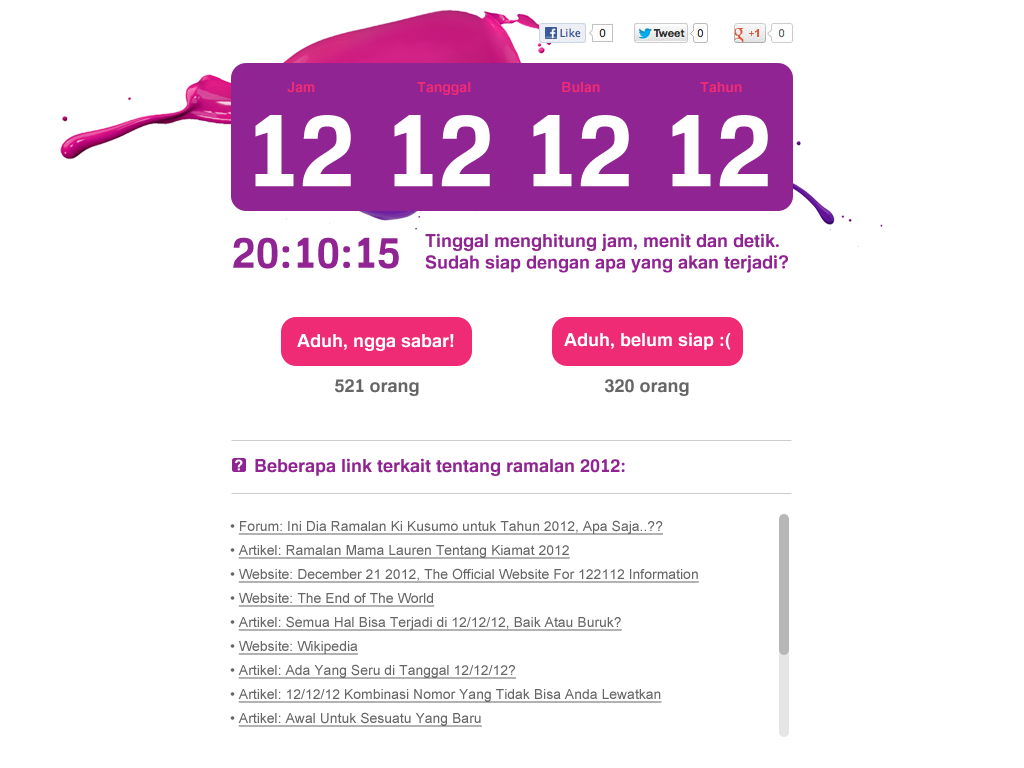
<style>
.page{position:relative;width:1024px;height:768px;background:#ffffff}
.page>*{position:absolute;margin:0}
.t1{font:14px "FamiliarPro-Bold";color:#ee2b74}
.t2{font:100px "FamiliarPro-Bold";color:#ffffff}
.t3{font:18px "FamiliarPro-Bold";color:#902492}
.t4{font:42px "FamiliarPro-Bold";color:#902492}
.t5{font:18px "FamiliarPro-Bold";color:#ffffff}
.t6{font:18px "FamiliarPro-Bold";color:#666666}
.t7{font:14px/24px "ArialMT";color:#666666;text-decoration:underline}
.t8{font:14px/24px "ArialMT";color:#666666}
</style>
<div class="page">
<p class="t1" style="left:287px;top:82px;width:28px;height:11px">Jam</p>
<p class="t1" style="left:417px;top:82px;width:54px;height:13px">Tanggal</p>
<p class="t1" style="left:562px;top:82px;width:38px;height:11px">Bulan</p>
<p class="t1" style="left:700px;top:82px;width:42px;height:11px">Tahun</p>
<p class="t2" style="left:255px;top:115px;width:513px;height:72px">12 12 12 12</p>
<p class="t3" style="left:425px;top:233px;width:363px;height:40px">Tinggal menghitung jam, menit dan detik.<br>Sudah siap dengan apa yang akan terjadi?</p>
<p class="t4" style="left:233px;top:237px;width:166px;height:32px">20:10:15</p>
<p class="t5" style="left:297px;top:334px;width:157px;height:17px">Aduh, ngga sabar!</p>
<p class="t5" style="left:564px;top:332px;width:167px;height:18px">Aduh, belum siap :(</p>
<p class="t6" style="left:335px;top:379px;width:84px;height:17px">521 orang</p>
<p class="t6" style="left:605px;top:379px;width:84px;height:17px">320 orang</p>
<p class="t3" style="left:255px;top:458px;width:370px;height:18px">Beberapa link terkait tentang ramalan 2012:</p>
<p class="t7" style="left:230px;top:520px;width:469px;height:207px"><span class="t8">• </span>Forum: Ini Dia Ramalan Ki Kusumo untuk Tahun 2012, Apa Saja..??<br><span class="t8">• </span>Artikel: Ramalan Mama Lauren Tentang Kiamat 2012<br><span class="t8">• </span>Website: December 21 2012, The Official Website For 122112 Information<br><span class="t8">• </span>Website: The End of The World<br><span class="t8">• </span>Artikel: Semua Hal Bisa Terjadi di 12/12/12, Baik Atau Buruk?<br><span class="t8">• </span>Website: Wikipedia<br><span class="t8">• </span>Artikel: Ada Yang Seru di Tanggal 12/12/12?<br><span class="t8">• </span>Artikel: 12/12/12 Kombinasi Nomor Yang Tidak Bisa Anda Lewatkan<br><span class="t8">• </span>Artikel: Awal Untuk Sesuatu Yang Baru</p>
</div>
